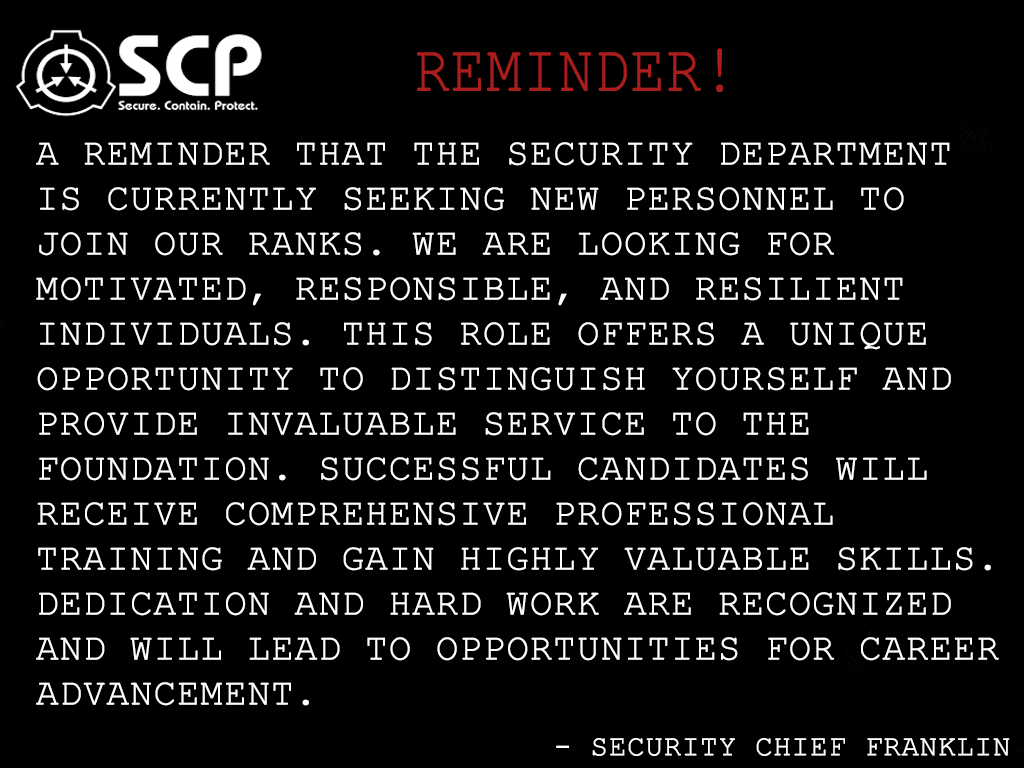
<style>
.page{position:relative;width:1024px;height:768px;background:#000000}
.page>*{position:absolute;margin:0}
.t1{font:66.7px "CourierNewPSMT";color:#aa1d1d;text-transform:uppercase;font-weight:bold;scale:0.86 1}
.t2{font:37.5px "CourierNewPSMT";color:#ffffff;text-transform:uppercase;font-weight:bold}
.t3{font:29.2px "CourierNewPSMT";color:#ffffff;text-transform:uppercase;font-weight:bold}
</style>
<div class="page">
<p class="t1" style="left:417px;top:48px;width:306px;height:44px">Reminder!</p>
<p class="t2" style="left:36px;top:142px;width:963px;height:564px">A reminder that the Security Department is currently seeking new personnel to join our ranks. We are looking for motivated, responsible, and resilient individuals. This role offers a unique opportunity to distinguish yourself and provide invaluable service to the Foundation. Successful candidates will receive comprehensive professional training and gain highly valuable skills. Dedication and hard work are recognized and will lead to opportunities for career advancement.</p>
<p class="t3" style="left:556px;top:738px;width:454px;height:18px">- security chief franklin</p>
</div>
